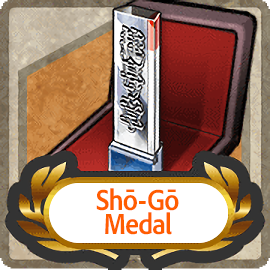
<style>
.page{position:relative;width:270px;height:270px}
.page>*{position:absolute;margin:0}
.t1{font:30px/24px "AdobeClean-Bold";letter-spacing:-0.04em;color:#ff5d00;scale:0.9 1}
</style>
<div class="page">
<p class="t1" style="left:96px;top:188px;width:83px;height:47px;text-align:center">Shō-Gō<br>Medal</p>
</div>
